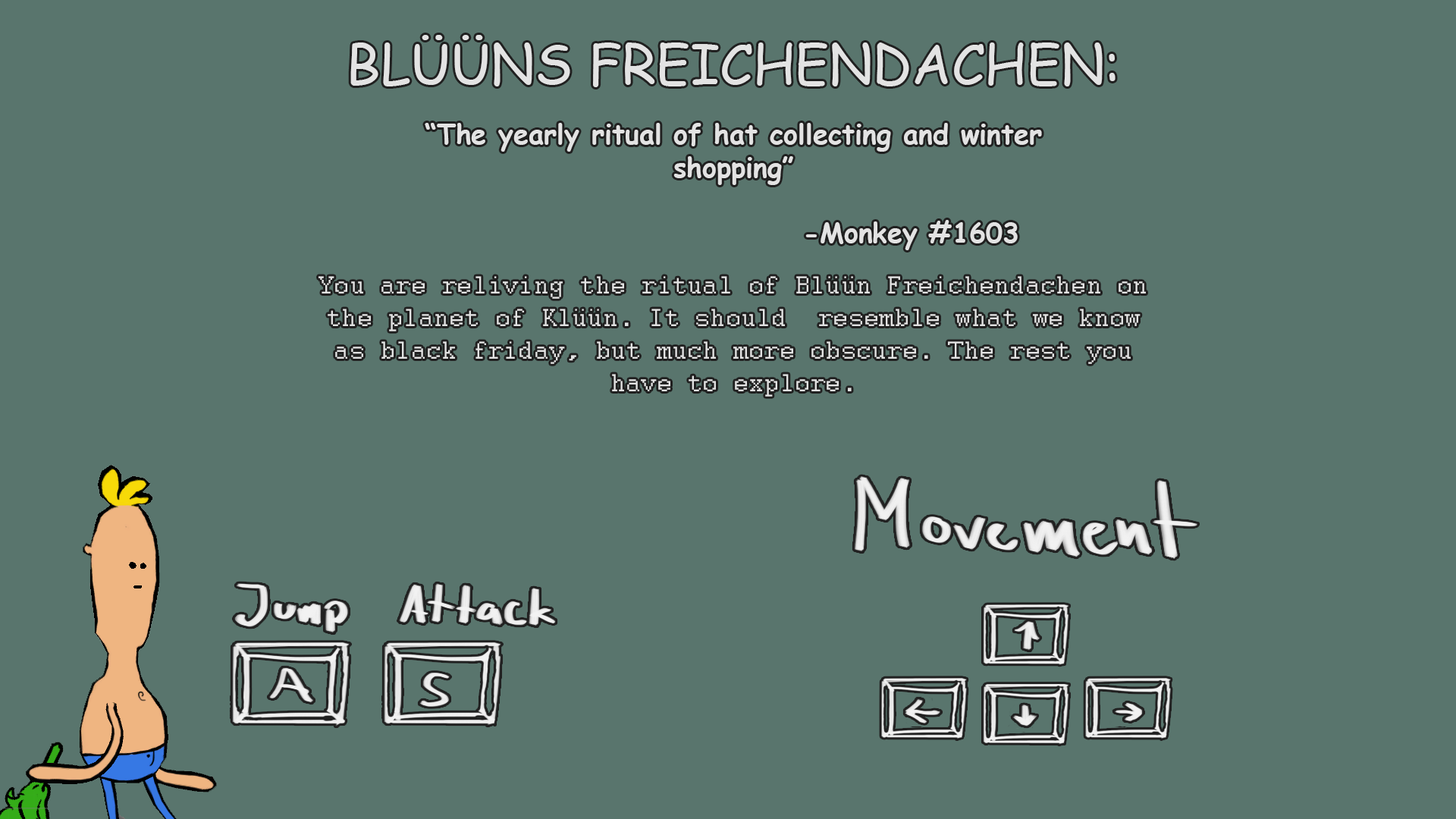
<style>
.page{position:relative;width:1456px;height:819px;background:#59756d}
.page>*{position:absolute;margin:0}
.t1{font:54.6px "ComicSansMS";color:#e3e3e3}
.t2{font:27.3px "ComicSansMS-Bold";color:#e3e3e3}
.t3{font:27.3px "Courier";color:#e3e3e3}
</style>
<div class="page">
<p class="t1" style="left:350px;top:35px;width:765px;height:52px">BLÜÜNS FREICHENDACHEN:</p>
<p class="t2" style="left:425px;top:123px;width:617px;height:127px;text-align:center">“The yearly ritual of hat collecting and winter shopping”<br><br>             -Monkey #1603</p>
<p class="t3" style="left:318px;top:276px;width:828px;height:121px;text-align:center">You are reliving the ritual of Blüün Freichendachen on the planet of Klüün. It should  resemble what we know as black friday, but much more obscure. The rest you have to explore.</p>
</div>
